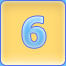
<style>
.page{position:relative;width:66px;height:66px}
.page>*{position:absolute;margin:0}
.t1{font:41px "Tahoma-Bold"}
</style>
<div class="page">
<p class="t1" style="left:22px;top:16px;width:24px;height:32px">6</p>
<p class="t1" style="left:22px;top:16px;width:24px;height:32px">6</p>
</div>
